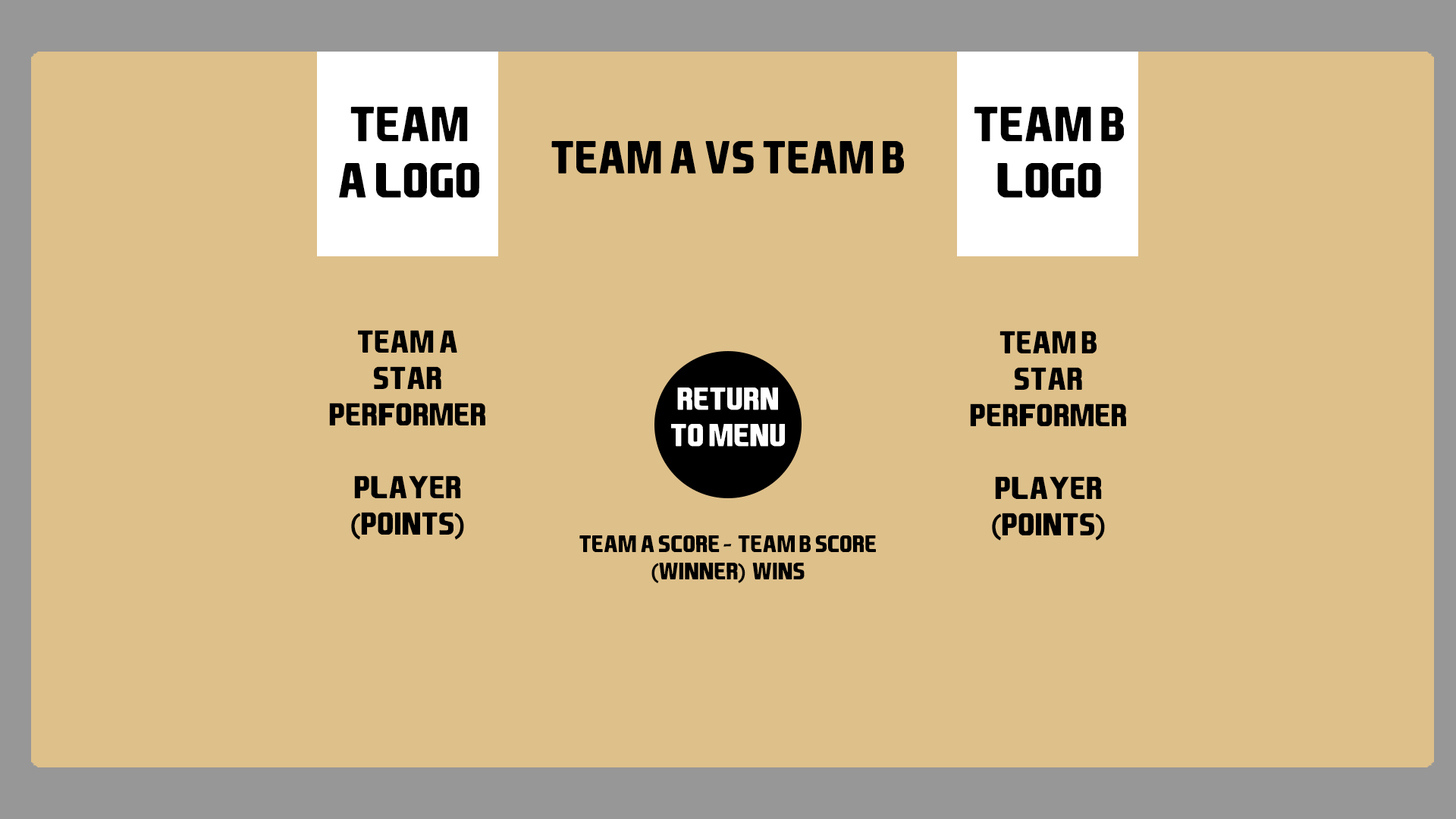
<style>
.page{position:relative;width:1456px;height:819px;background:#dec08a}
.page>*{position:absolute;margin:0}
.t1{font:47px "EASPORTS";color:#000000}
.t2{font:44.2px "EASPORTS";color:#000000}
.t3{font:30.3px "EASPORTS";color:#000000}
.t4{font:30.3px "BerlinSansFB-Reg";color:#000000}
.t5{font:30.3px "EASPORTS";color:#ffffff}
.t6{font:22.7px "EASPORTS";color:#000000}
.t7{font:22.7px "BerlinSansFB-Reg";color:#000000}
</style>
<div class="page">
<p class="t1" style="left:339px;top:106px;width:140px;height:92px;text-align:center">team a Logo</p>
<p class="t1" style="left:974px;top:106px;width:150px;height:92px;text-align:center">team b Logo</p>
<p class="t2" style="left:551px;top:141px;width:353px;height:33px">Team a vs team b</p>
<p class="t3" style="left:329px;top:330px;width:156px;height:210px;text-align:center">Team a<br>Star performer<br><br>player <span class="t4">(</span>points<span class="t4">)</span></p>
<p class="t3" style="left:970px;top:331px;width:156px;height:210px;text-align:center">Team B<br>Star performer<br><br>player <span class="t4">(</span>points<span class="t4">)</span></p>
<p class="t5" style="left:671px;top:388px;width:114px;height:59px;text-align:center">return to menu</p>
<p class="t6" style="left:579px;top:535px;width:297px;height:48px;text-align:center">Team a score <span class="t7">- </span>team b score<br><span class="t7">(</span>winner<span class="t7">) </span>wins</p>
</div>
